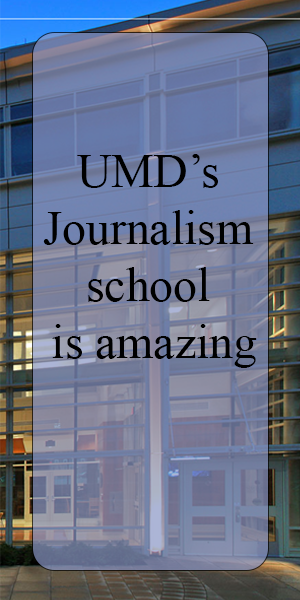
<style>
.page{position:relative;width:300px;height:600px}
.page>*{position:absolute;margin:0}
.t1{font:47.7px "TimesNewRomanPSMT";color:#000000}
</style>
<div class="page">
<p class="t1" style="left:43px;top:154px;width:214px;height:214px;text-align:center">UMD’s <br>Journalism <br>school <br>is amazing</p>
</div>
